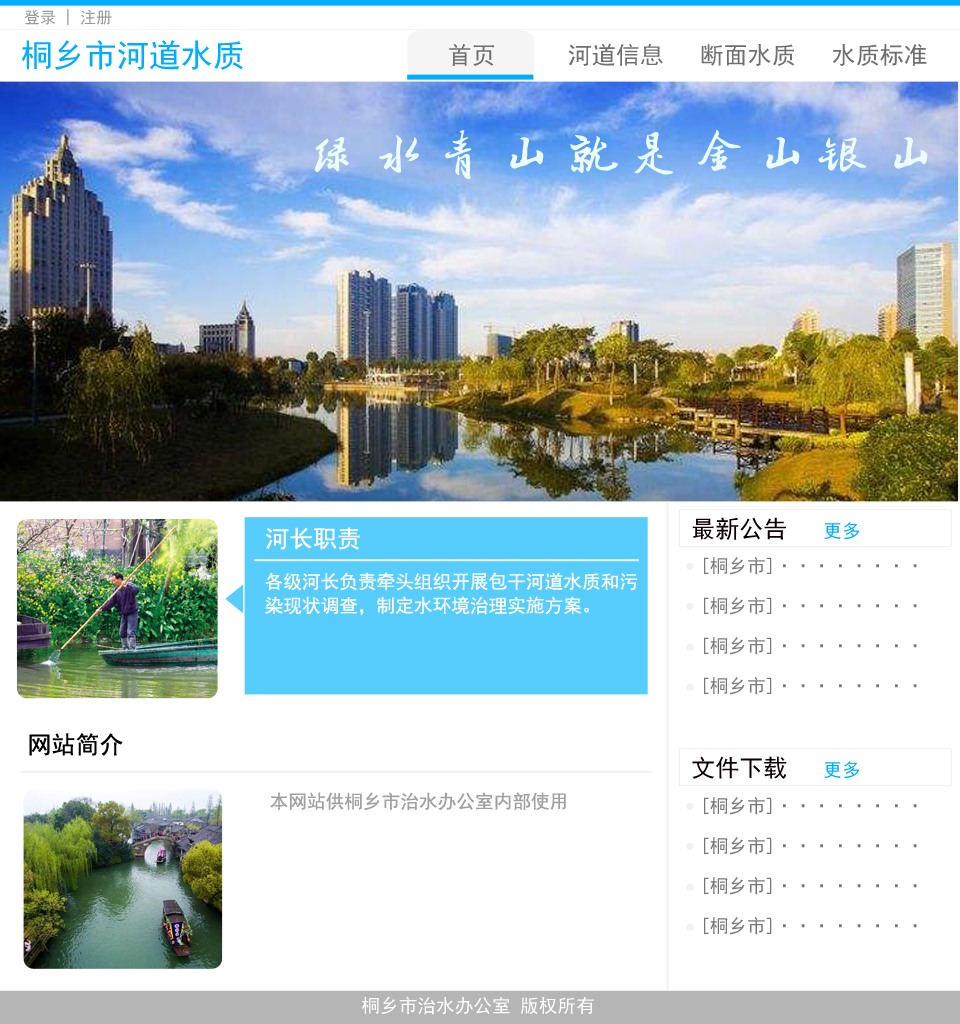
<style>
.page{position:relative;width:960px;height:1024px;background:#ffffff}
.page>*{position:absolute;margin:0}
.t1{font:16px "SimHei";color:#999999}
.t2{font:32px "SimHei";color:#00aeff}
.t3{font:24px "SimHei";color:#6f6f6f}
.t4{font:64px "zhongqi-Hanmo";color:#ebfefc}
.t5{font:24px "SimHei";color:#0d0000}
.t6{font:18.7px "SimHei";color:#00aeff}
.t7{font:24px "SimHei";color:#fffefe}
.t8{font:18.7px/40px "SimHei";color:#7a7979}
.t9{font:18.7px/24px "SimHei";color:#ffffff}
.t10{font:24px "SimHei";color:#000000}
.t11{font:18.7px "SimHei";color:#a1a1a1}
.t12{font:18.7px/40px "SimHei";color:#777575}
.t13{font:18.7px "SimHei";color:#ffffff}
</style>
<div class="page">
<p class="t1" style="left:24px;top:9px;width:88px;height:17px">登录 | 注册</p>
<p class="t2" style="left:21px;top:40px;width:222px;height:30px">桐乡市河道水质</p>
<p class="t3" style="left:449px;top:43px;width:478px;height:23px">首页      河道信息   断面水质   水质标准</p>
<p class="t4" style="left:314px;top:129px;width:614px;height:51px">绿水青山就是金山银山</p>
<p class="t5" style="left:692px;top:517px;width:168px;height:23px">最新公告   <span class="t6">更多</span></p>
<p class="t7" style="left:266px;top:527px;width:94px;height:23px">河长职责</p>
<p class="t8" style="left:704px;top:557px;width:213px;height:138px">[桐乡市]········<br>[桐乡市]········<br>[桐乡市]········<br>[桐乡市]········</p>
<p class="t9" style="left:265px;top:572px;width:373px;height:43px">各级河长负责牵头组织开展包干河道水质和污<br>染现状调查，制定水环境治理实施方案。</p>
<p class="t10" style="left:29px;top:733px;width:94px;height:23px">网站简介</p>
<p class="t5" style="left:692px;top:756px;width:168px;height:23px">文件下载   <span class="t6">更多</span></p>
<p class="t11" style="left:270px;top:792px;width:296px;height:19px">本网站供桐乡市治水办公室内部使用</p>
<p class="t12" style="left:704px;top:797px;width:213px;height:138px">[桐乡市]········<br>[桐乡市]········<br>[桐乡市]········<br>[桐乡市]········</p>
<p class="t13" style="left:362px;top:996px;width:232px;height:19px">桐乡市治水办公室 版权所有</p>
</div>
